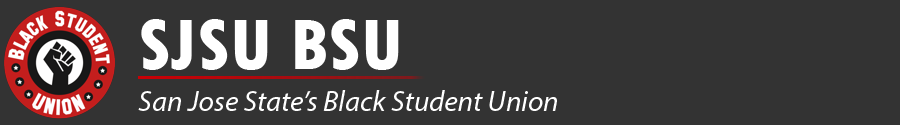
<style>
.page{position:relative;width:900px;height:125px;background:#333333}
.page>*{position:absolute;margin:0}
.t1{font:75px "TwCenMT-CondensedExtraBold";color:#ffffff}
.t2{font:29.2px "MyriadPro-It";color:#ffffff}
</style>
<div class="page">
<p class="t1" style="left:141px;top:19px;width:258px;height:51px">SJSU BSU</p>
<p class="t2" style="left:138px;top:90px;width:419px;height:21px">San Jose State’s Black Student Union</p>
</div>
